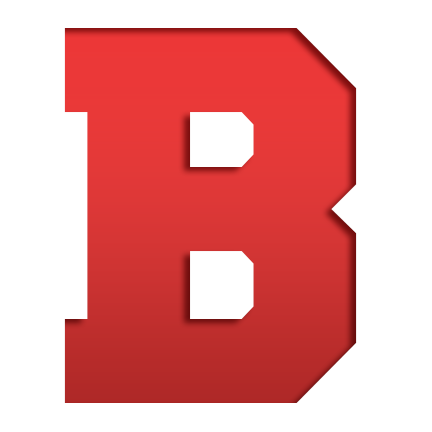
<style>
.page{position:relative;width:432px;height:432px;background:#ffffff}
.page>*{position:absolute;margin:0}
.t1{font:562.1px "Freshman";letter-spacing:-0.02em}
</style>
<div class="page">
<p class="t1" style="left:64px;top:28px;width:293px;height:375px">b</p>
</div>
